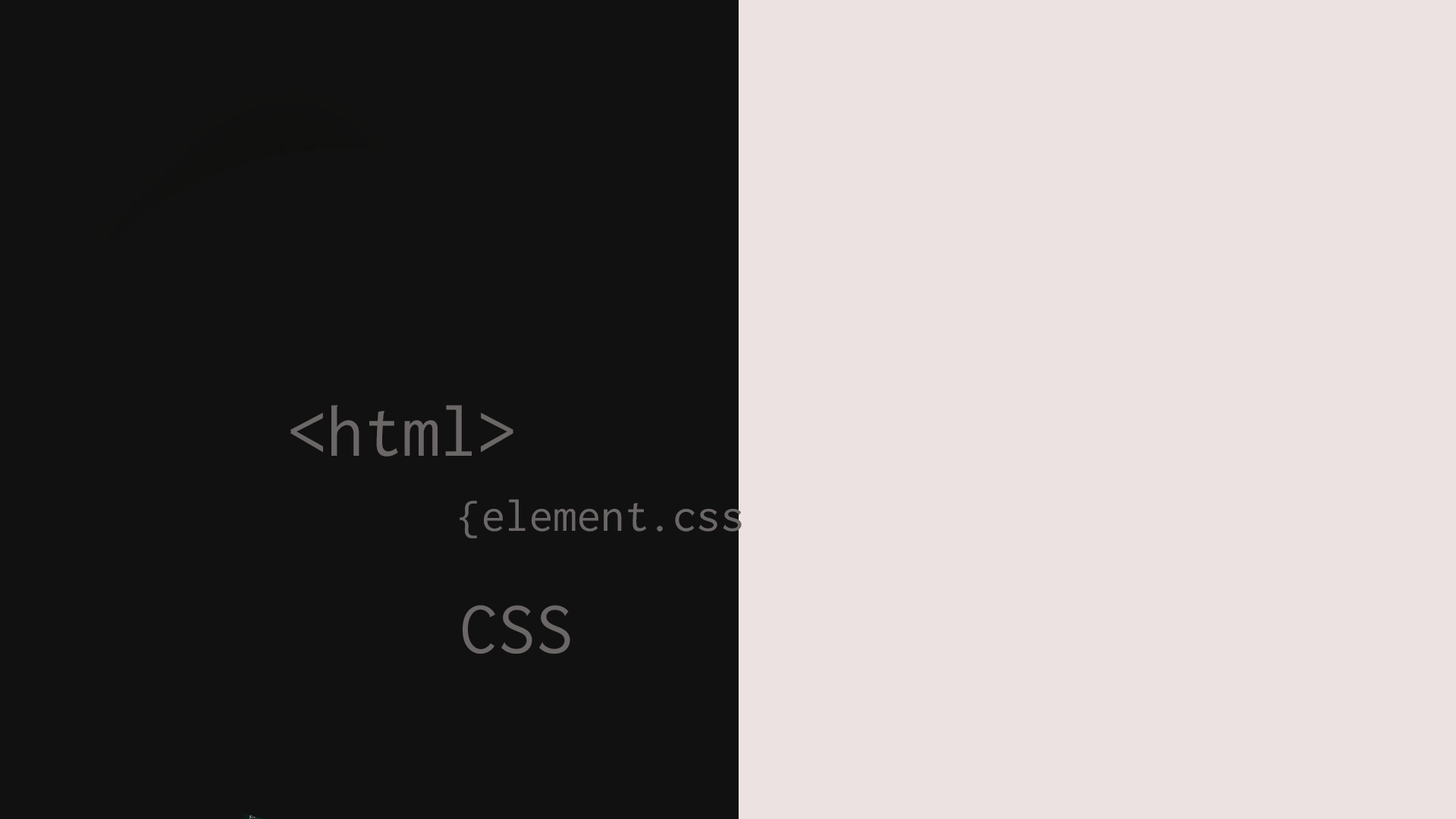
<style>
.page{position:relative;width:1456px;height:819px;background:#ede2e2}
.page>*{position:absolute;margin:0}
.t1{font:75.8px "Inconsolata";color:#6c6767}
.t2{font:47.1px "Inconsolata";color:#6c6767}
</style>
<div class="page">
<p class="t1" style="left:290px;top:405px;width:223px;height:52px">&lt;html&gt;</p>
<p class="t2" style="left:460px;top:499px;width:282px;height:39px">{element.css</p>
<p class="t1" style="left:463px;top:605px;width:107px;height:49px">CSS HTML44</p>
</div>
